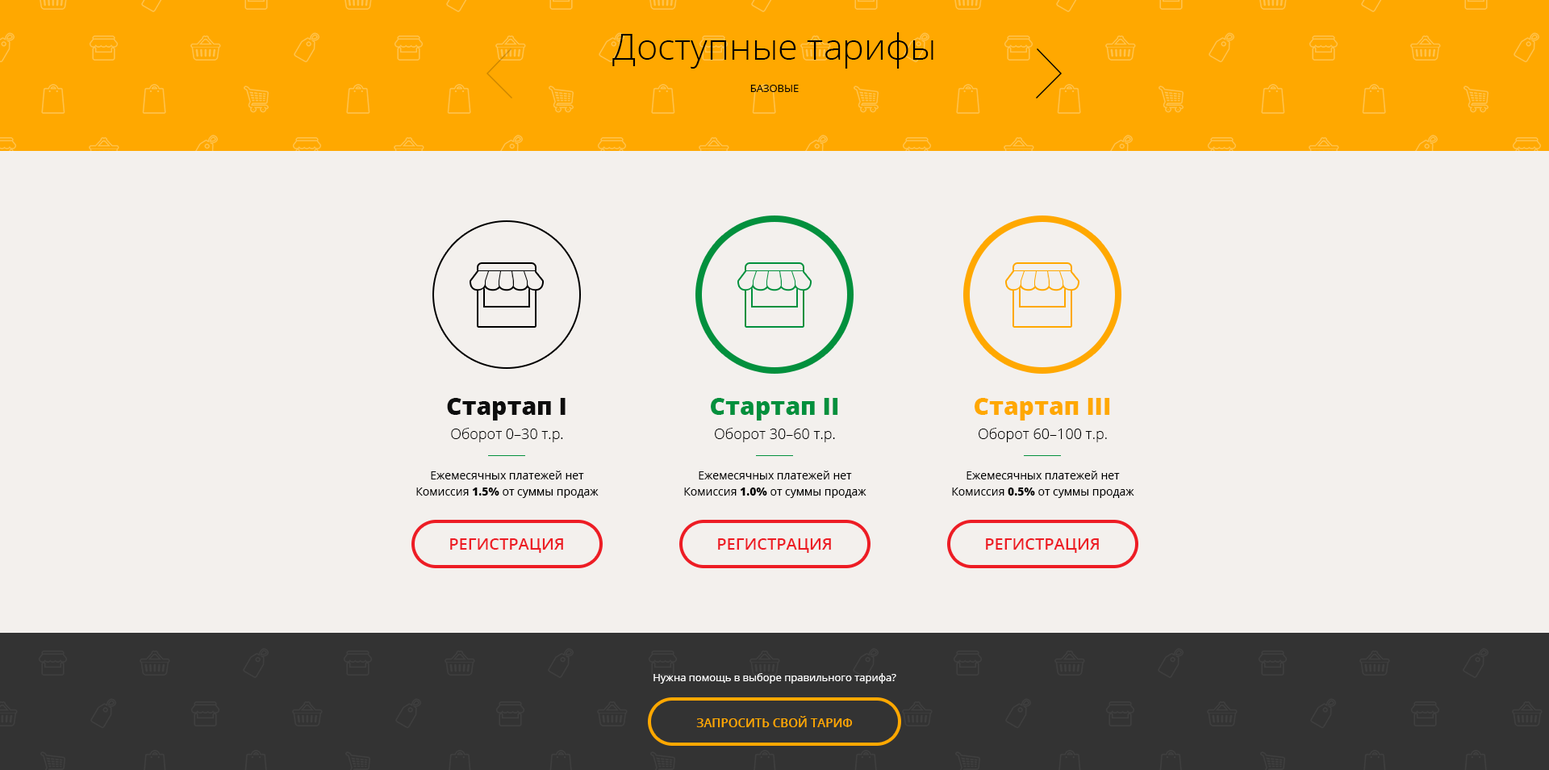
<style>
.page{position:relative;width:1549px;height:770px;background:#f3f0ed}
.page>*{position:absolute;margin:0}
.t1{font:36.3px/16.1px "OpenSans-Light";color:#000000}
.t2{font:10.5px/16.1px "OpenSans";color:#000000;text-transform:uppercase}
.t3{font:24.2px "OpenSans-Extrabold";color:#0e0e0e}
.t4{font:24.2px "OpenSans-Extrabold";color:#02903d}
.t5{font:24.2px "OpenSans-Extrabold";color:#ffa800}
.t6{font:14.5px "OpenSans-Light";color:#000000}
.t7{font:11.3px/16.1px "OpenSans";color:#000000}
.t8{font:11.3px/16.1px "OpenSans-Extrabold";color:#000000}
.t9{font:16.1px "OpenSans-Semibold";color:#ed1c24;text-transform:uppercase}
.t10{font:10.5px "OpenSans";color:#ffffff}
.t11{font:12.1px "OpenSans-Semibold";color:#ffa800;text-transform:uppercase}
</style>
<div class="page">
<p class="t1" style="left:612px;top:32px;width:322px;height:60px;text-align:center">Доступные тарифы<br><br><span class="t2">Базовые</span></p>
<p class="t3" style="left:447px;top:398px;width:119px;height:22px">Стартап I</p>
<p class="t4" style="left:711px;top:398px;width:127px;height:22px">Стартап II</p>
<p class="t5" style="left:975px;top:398px;width:135px;height:22px">Стартап III</p>
<p class="t6" style="left:451px;top:428px;width:112px;height:14px">Оборот 0–30 т.р.</p>
<p class="t6" style="left:715px;top:428px;width:120px;height:14px">Оборот 30–60 т.р.</p>
<p class="t6" style="left:979px;top:428px;width:128px;height:14px">Оборот 60–100 т.р.</p>
<p class="t7" style="left:416px;top:470px;width:183px;height:28px;text-align:center">Ежемесячных платежей нет<br>Комиссия <span class="t8">1.5%</span> от суммы продаж</p>
<p class="t7" style="left:684px;top:470px;width:183px;height:28px;text-align:center">Ежемесячных платежей нет<br>Комиссия <span class="t8">1.0%</span> от суммы продаж</p>
<p class="t7" style="left:952px;top:470px;width:182px;height:28px;text-align:center">Ежемесячных платежей нет<br>Комиссия <span class="t8">0.5%</span> от суммы продаж</p>
<p class="t9" style="left:450px;top:538px;width:113px;height:15px">регистрация</p>
<p class="t9" style="left:718px;top:538px;width:113px;height:15px">регистрация</p>
<p class="t9" style="left:986px;top:538px;width:113px;height:15px">регистрация</p>
<p class="t10" style="left:654px;top:673px;width:242px;height:10px">Нужна помощь в выборе правильного тарифа?</p>
<p class="t11" style="left:696px;top:716px;width:157px;height:11px">Запросить свой тариф</p>
</div>
